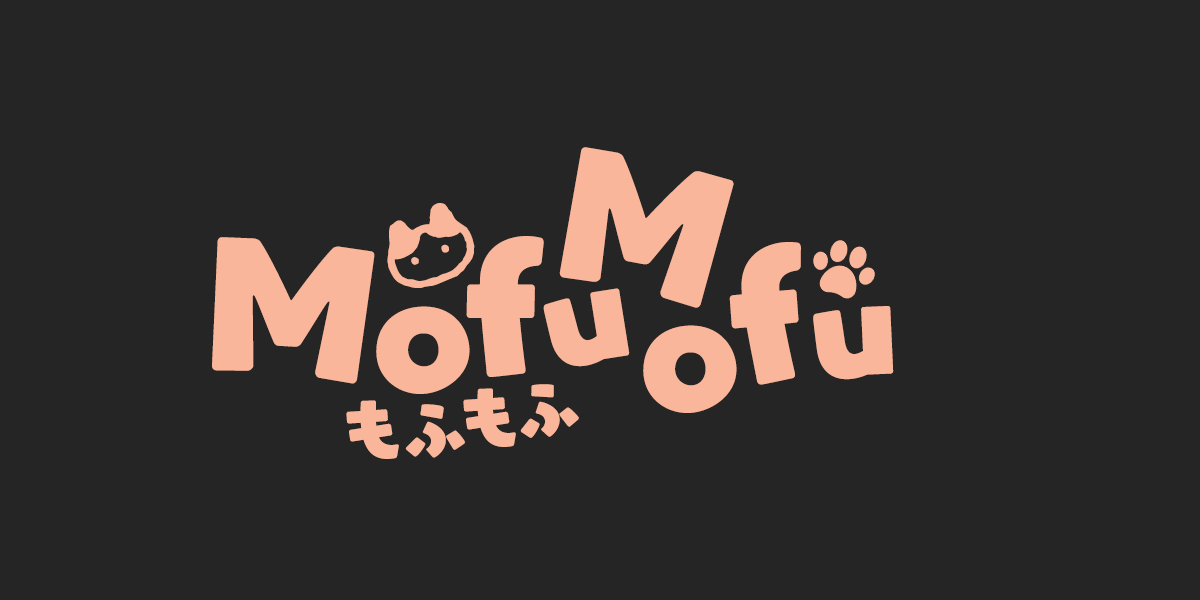
<style>
.page{position:relative;width:1200px;height:600px;background:#252525}
.page>*{position:absolute;margin:0}
.t1{font:158.5px "YurukaStd-UB";letter-spacing:0.06em;color:#fab69a}
.t2{font:90.8px "Ownglyph_PDH-Rg";letter-spacing:0.06em;color:#fab69a}
.t3{font:160px "YurukaStd-UB";letter-spacing:0.06em;color:#fab69a}
.t4{font:158.4px "YurukaStd-UB";letter-spacing:0.06em;color:#fab69a}
.t5{font:120px "YurukaStd-UB";letter-spacing:0.06em;color:#fab69a}
.t6{font:143.7px "YurukaStd-UB";letter-spacing:0.06em;color:#fab69a}
.t7{font:70px "YurukaStd-UB";letter-spacing:0.06em;color:#fab69a}
.t8{font:61.3px "YurukaStd-UB";letter-spacing:0.06em;color:#fab69a}
</style>
<div class="page">
<p class="t1" style="left:559px;top:147px;width:175px;height:161px;rotate:13deg">M</p>
<p class="t2" style="left:387px;top:203px;width:88px;height:85px;rotate:-23deg">¢</p>
<p class="t3" style="left:212px;top:237px;width:163px;height:147px;rotate:5deg">M</p>
<p class="t3" style="left:466px;top:236px;width:78px;height:141px;rotate:-3deg">f</p>
<p class="t4" style="left:729px;top:242px;width:72px;height:143px;rotate:-8deg">f</p>
<p class="t5" style="left:543px;top:288px;width:87px;height:79px;rotate:-12deg">u</p>
<p class="t6" style="left:376px;top:306px;width:94px;height:88px">o</p>
<p class="t5" style="left:813px;top:306px;width:81px;height:74px;rotate:-6deg">u</p>
<p class="t6" style="left:643px;top:325px;width:94px;height:88px">o</p>
<p class="t7" style="left:463px;top:388px;width:53px;height:59px;rotate:-10deg">も</p>
<p class="t8" style="left:520px;top:384px;width:59px;height:54px;rotate:-9deg">ふ</p>
<p class="t7" style="left:346px;top:400px;width:53px;height:59px;rotate:-10deg">も</p>
<p class="t8" style="left:405px;top:404px;width:60px;height:54px;rotate:-2deg">ふ</p>
</div>
